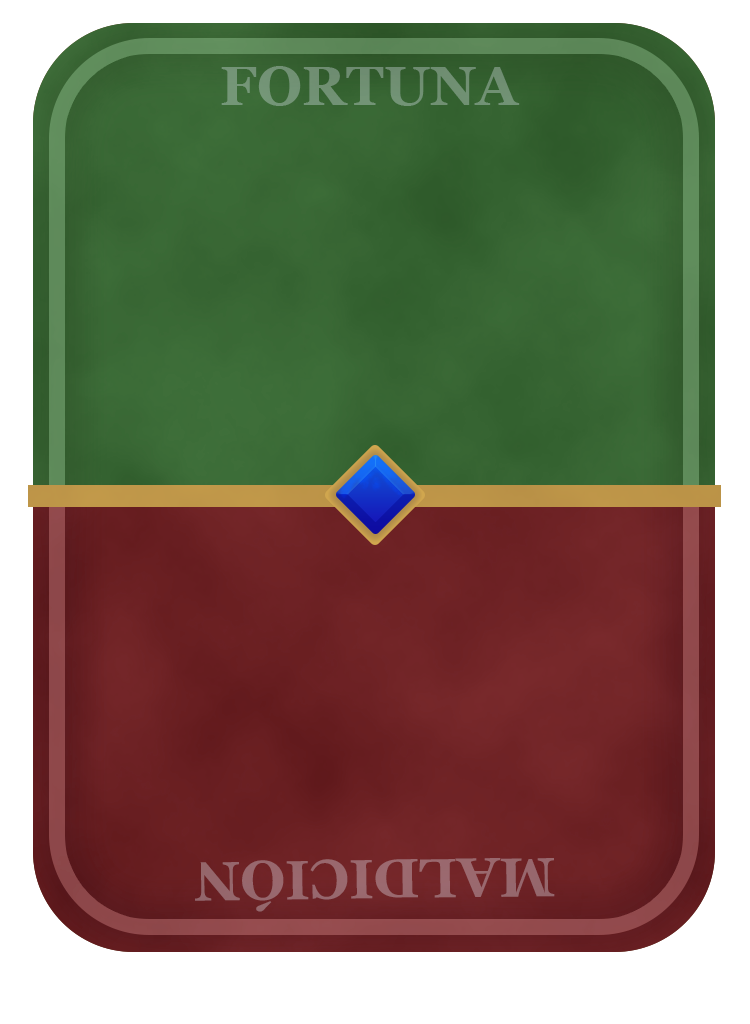
<style>
.page{position:relative;width:750px;height:1024px}
.page>*{position:absolute;margin:0}
.t1{font:55px "Georgia-Bold";color:#719173}
.t2{font:55px "Georgia-Bold";color:#99686e}
</style>
<div class="page">
<p class="t1" style="left:221px;top:66px;width:299px;height:40px">FORTUNA</p>
<p class="t2" style="left:195px;top:858px;width:360px;height:54px;rotate:179deg">MALDICIÓN</p>
</div>
